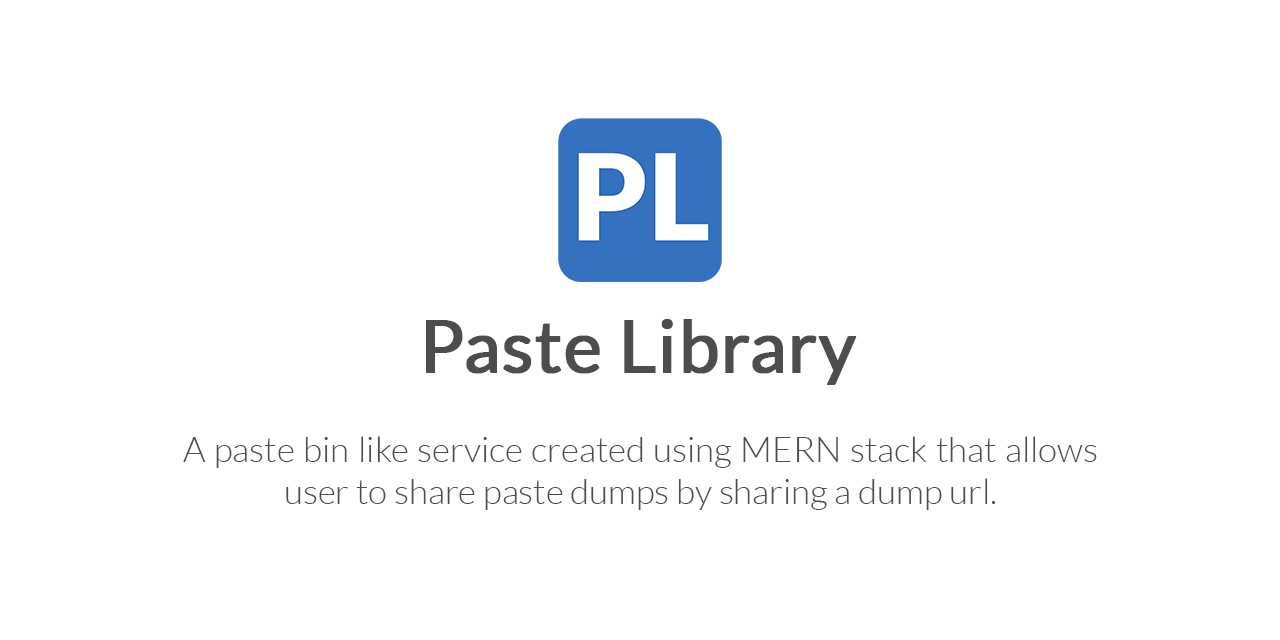
<style>
.page{position:relative;width:1280px;height:640px;background:#ffffff}
.page>*{position:absolute;margin:0}
.t1{font:71.7px "Lato-Regular";color:#4d4d4d;font-weight:bold}
.t2{font:34.8px "Lato-Light";color:#4d4d4d}
</style>
<div class="page">
<p class="t1" style="left:426px;top:319px;width:431px;height:66px">Paste Library</p>
<p class="t2" style="left:183px;top:436px;width:914px;height:74px;text-align:justify">A paste bin like service created using MERN stack that allows user to share paste dumps by sharing a dump url.</p>
</div>
